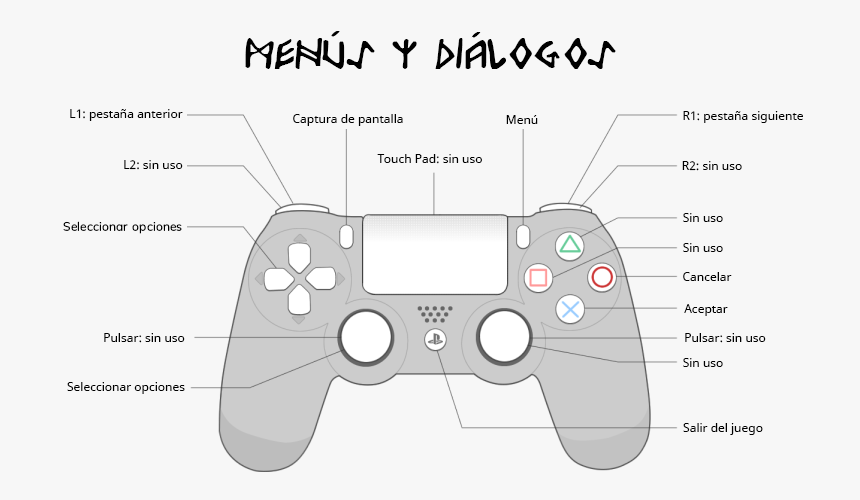
<style>
.page{position:relative;width:860px;height:500px;background:#f7f7f7}
.page>*{position:absolute;margin:0}
.t1{font:48px "Odinson";color:#000000}
.t2{font:12px "NotoSans";color:#000000}
</style>
<div class="page">
<p class="t1" style="left:245px;top:31px;width:371px;height:41px">Menús y diálogos</p>
<p class="t2" style="left:70px;top:109px;width:113px;height:12px">L1: pestaña anterior</p>
<p class="t2" style="left:683px;top:111px;width:120px;height:12px">R1: pestaña siguiente</p>
<p class="t2" style="left:293px;top:114px;width:110px;height:12px">Captura de pantalla</p>
<p class="t2" style="left:506px;top:115px;width:32px;height:9px">Menú</p>
<p class="t2" style="left:124px;top:160px;width:59px;height:10px">L2: sin uso</p>
<p class="t2" style="left:377px;top:154px;width:105px;height:10px">Touch Pad: sin uso</p>
<p class="t2" style="left:682px;top:161px;width:60px;height:10px">R2: sin uso</p>
<p class="t2" style="left:683px;top:213px;width:40px;height:9px">Sin uso</p>
<p class="t2" style="left:683px;top:243px;width:40px;height:9px">Sin uso</p>
<p class="t2" style="left:683px;top:272px;width:49px;height:9px">Cancelar</p>
<p class="t2" style="left:684px;top:304px;width:44px;height:12px">Aceptar</p>
<p class="t2" style="left:104px;top:333px;width:81px;height:10px">Pulsar: sin uso</p>
<p class="t2" style="left:685px;top:333px;width:81px;height:10px">Pulsar: sin uso</p>
<p class="t2" style="left:683px;top:358px;width:40px;height:9px">Sin uso</p>
<p class="t2" style="left:67px;top:382px;width:118px;height:12px">Seleccionar opciones</p>
<p class="t2" style="left:683px;top:423px;width:80px;height:12px">Salir del juego</p>
</div>
